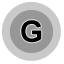
<style>
.page{position:relative;width:64px;height:64px;background:#ffffff}
.page>*{position:absolute;margin:0}
.t1{font:30px "Arial-BoldMT";color:#000000}
</style>
<div class="page">
<p class="t1" style="left:21px;top:20px;width:21px;height:23px">G</p>
</div>
